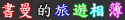
<style>
.page{position:relative;width:125px;height:20px;background:#333333}
.page>*{position:absolute;margin:0}
.t1{font:16px "DFKaiShu-SB-Estd-BF";letter-spacing:0.1em;color:#ffffff}
</style>
<div class="page">
<p class="t1" style="left:2px;top:3px;width:13px;height:15px">書</p>
<p class="t1" style="left:19px;top:3px;width:13px;height:15px">曼</p>
<p class="t1" style="left:38px;top:4px;width:13px;height:13px">的</p>
<p class="t1" style="left:54px;top:3px;width:16px;height:14px">旅</p>
<p class="t1" style="left:73px;top:3px;width:15px;height:14px">遊</p>
<p class="t1" style="left:90px;top:3px;width:13px;height:14px">相</p>
<p class="t1" style="left:109px;top:2px;width:14px;height:16px">簿</p>
</div>
